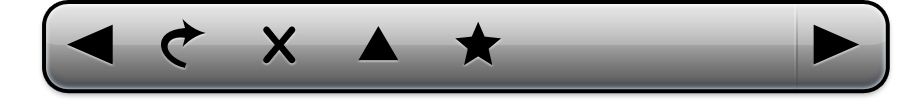
<style>
.page{position:relative;width:922px;height:100px}
.page>*{position:absolute;margin:0}
.t1{font:68.1px "OCRAStd";color:#000000}
</style>
<div class="page">
<p class="t1" style="left:263px;top:26px;width:33px;height:38px">x</p>
</div>
